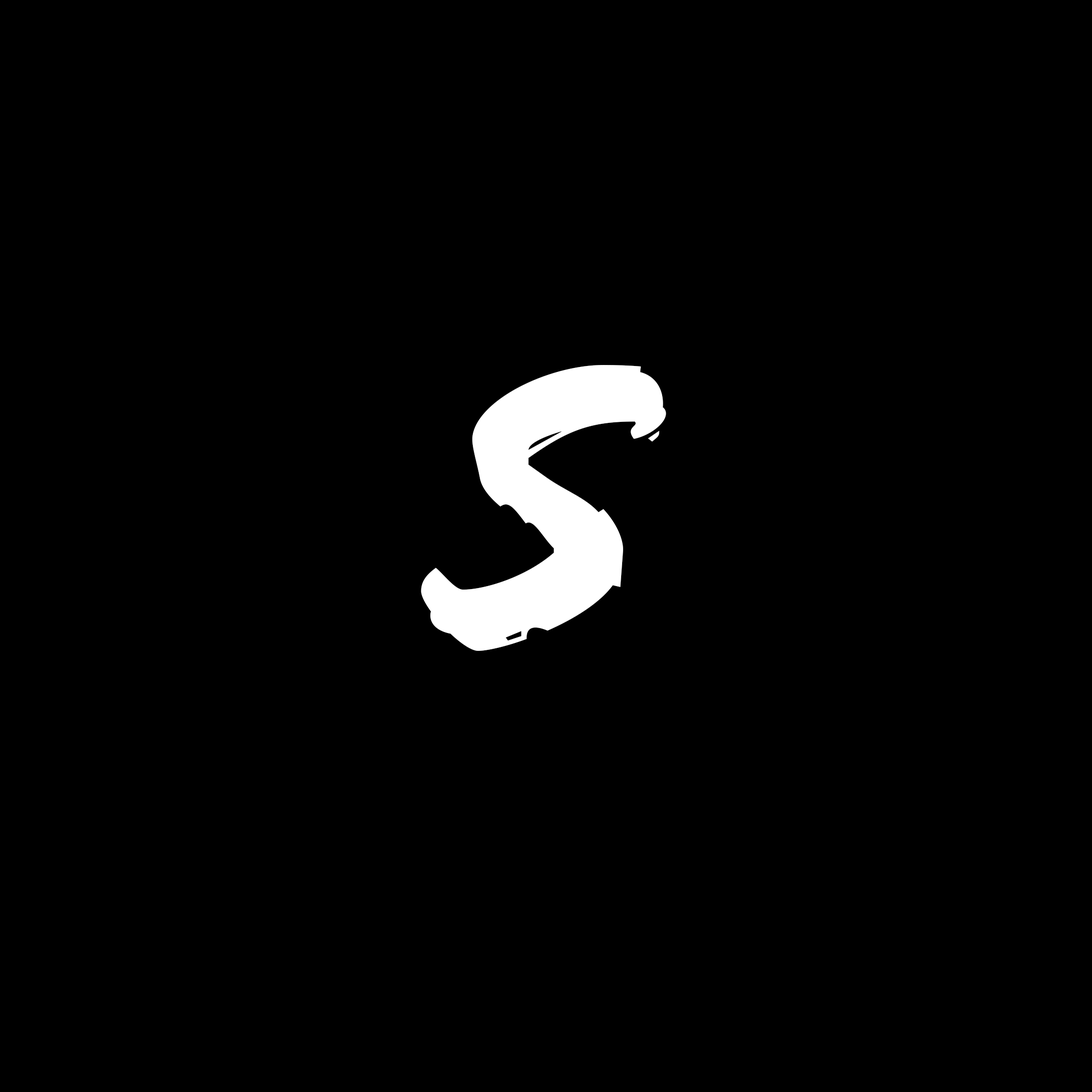
<style>
.page{position:relative;width:1092px;height:1092px;background:#000000}
.page>*{position:absolute;margin:0}
.t1{font:445.1px "FloodStd";color:#ffffff}
</style>
<div class="page">
<p class="t1" style="left:421px;top:365px;width:245px;height:286px">S</p>
</div>
